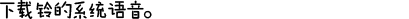
<style>
.page{position:relative;width:409px;height:19px;background:#ffffff}
.page>*{position:absolute;margin:0}
.t1{font:22px "¢è?";letter-spacing:-0.1em;color:#000000}
</style>
<div class="page">
<p class="t1" style="left:0px;top:0px;width:152px;height:20px">下载铃的系统语音。</p>
</div>
